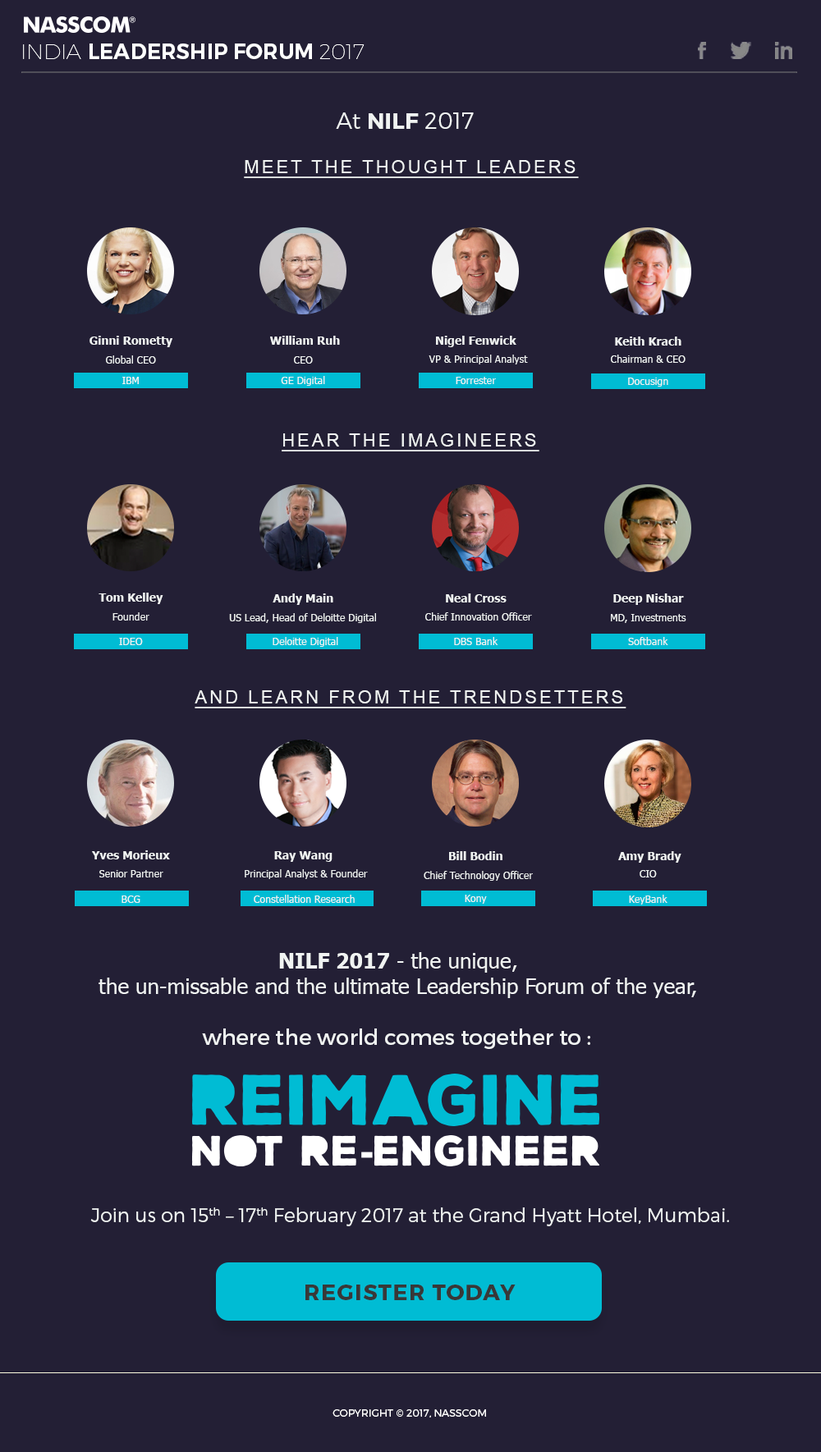
<style>
.page{position:relative;width:821px;height:1452px;background:#231f35}
.page>*{position:absolute;margin:0}
.t1{font:21.4px "Montserrat-SemiBold";color:#ffffff;text-transform:uppercase}
.t2{font:21.4px "Montserrat-Hairline";color:#ffffff;text-transform:uppercase}
.t3{font:22.6px "Montserrat-Bold";color:#f0f3f2}
.t4{font:22.6px "Montserrat-Light";color:#f0f3f2}
.t5{font:18.1px "ArialMT";letter-spacing:0.14em;color:#f0f3f2;text-transform:uppercase;text-decoration:underline}
.t6{font:11.5px "Tahoma-Bold";color:#f0f3f2}
.t7{font:11.6px "Tahoma-Bold";color:#f0f3f2}
.t8{font:10.1px "Tahoma";color:#f0f3f2}
.t9{font:10.2px "Tahoma";color:#f0f3f2}
.t10{font:21.3px "Tahoma";color:#f0f3f2}
.t11{font:21.3px "Tahoma-Bold";color:#f0f3f2}
.t12{font:21.6px "Montserrat-Regular";color:#f0f3f2}
.t13{font:19.1px "Montserrat-Light";color:#f0f3f2}
.t14{font:22.2px "Montserrat-Bold";letter-spacing:0.05em;color:#383838;text-transform:uppercase}
.t15{font:10.3px "Montserrat-Light";color:#ffffff;text-transform:uppercase}
</style>
<div class="page">
<p class="t1" style="left:23px;top:44px;width:342px;height:15px"><span class="t2">India </span>Leadership Forum <span class="t2">2017</span></p>
<p class="t3" style="left:336px;top:112px;width:138px;height:17px"><span class="t4">At </span>NILF<span class="t4"> 2017</span></p>
<p class="t5" style="left:244px;top:160px;width:335px;height:18px">Meet the Thought leaders</p>
<p class="t6" style="left:89px;top:336px;width:83px;height:11px">Ginni Rometty</p>
<p class="t6" style="left:270px;top:336px;width:70px;height:9px">William Ruh</p>
<p class="t6" style="left:436px;top:336px;width:80px;height:11px">Nigel Fenwick</p>
<p class="t7" style="left:615px;top:337px;width:66px;height:9px">Keith Krach</p>
<p class="t8" style="left:106px;top:356px;width:50px;height:8px">Global CEO</p>
<p class="t8" style="left:294px;top:356px;width:19px;height:8px">CEO</p>
<p class="t9" style="left:429px;top:355px;width:99px;height:10px">VP &amp; Principal Analyst</p>
<p class="t9" style="left:611px;top:355px;width:75px;height:8px">Chairman &amp; CEO</p>
<p class="t8" style="left:122px;top:377px;width:17px;height:7px">IBM</p>
<p class="t8" style="left:281px;top:376px;width:44px;height:10px">GE Digital</p>
<p class="t8" style="left:456px;top:377px;width:40px;height:7px">Forrester</p>
<p class="t8" style="left:628px;top:378px;width:40px;height:9px">Docusign</p>
<p class="t5" style="left:282px;top:433px;width:257px;height:19px">HEAR THE IMAGINEERS</p>
<p class="t6" style="left:99px;top:593px;width:64px;height:11px">Tom Kelley</p>
<p class="t6" style="left:273px;top:594px;width:60px;height:11px">Andy Main</p>
<p class="t6" style="left:446px;top:594px;width:61px;height:9px">Neal Cross</p>
<p class="t6" style="left:613px;top:594px;width:71px;height:11px">Deep Nishar</p>
<p class="t8" style="left:112px;top:612px;width:37px;height:9px">Founder</p>
<p class="t8" style="left:229px;top:613px;width:147px;height:10px">US Lead, Head of Deloitte Digital</p>
<p class="t8" style="left:425px;top:612px;width:107px;height:9px">Chief Innovation Officer</p>
<p class="t9" style="left:611px;top:614px;width:75px;height:9px">MD, Investments</p>
<p class="t8" style="left:119px;top:638px;width:24px;height:7px">IDEO</p>
<p class="t8" style="left:273px;top:637px;width:65px;height:10px">Deloitte Digital</p>
<p class="t8" style="left:454px;top:637px;width:44px;height:8px">DBS Bank</p>
<p class="t8" style="left:628px;top:637px;width:40px;height:8px">Softbank</p>
<p class="t5" style="left:195px;top:690px;width:431px;height:19px">and learn from the trendsetters</p>
<p class="t6" style="left:92px;top:851px;width:78px;height:9px">Yves Morieux</p>
<p class="t6" style="left:274px;top:851px;width:59px;height:11px">Ray Wang</p>
<p class="t6" style="left:449px;top:851px;width:53px;height:9px">Bill Bodin</p>
<p class="t6" style="left:618px;top:851px;width:63px;height:12px">Amy Brady</p>
<p class="t8" style="left:245px;top:869px;width:123px;height:10px">Principal Analyst &amp; Founder</p>
<p class="t8" style="left:99px;top:870px;width:64px;height:8px">Senior Partner</p>
<p class="t8" style="left:424px;top:871px;width:109px;height:10px">Chief Technology Officer</p>
<p class="t9" style="left:640px;top:870px;width:17px;height:8px">CIO</p>
<p class="t8" style="left:122px;top:896px;width:18px;height:7px">BCG</p>
<p class="t8" style="left:254px;top:895px;width:101px;height:8px">Constellation Research</p>
<p class="t8" style="left:465px;top:895px;width:22px;height:9px">Kony</p>
<p class="t8" style="left:629px;top:895px;width:38px;height:10px">KeyBank</p>
<p class="t10" style="left:99px;top:952px;width:597px;height:46px;text-align:center"><span class="t11">NILF 2017 </span>- the unique,<br>the un-missable and the ultimate Leadership Forum of the year,</p>
<p class="t12" style="left:202px;top:1029px;width:388px;height:20px">where the world comes together to :</p>
<p class="t13" style="left:90px;top:1208px;width:639px;height:19px">Join us on 15th – 17th February 2017 at the Grand Hyatt Hotel, Mumbai.</p>
<p class="t14" style="left:305px;top:1285px;width:211px;height:15px">Register today</p>
<p class="t15" style="left:333px;top:1410px;width:153px;height:8px">Copyright © 2017, NASSCOM</p>
</div>
